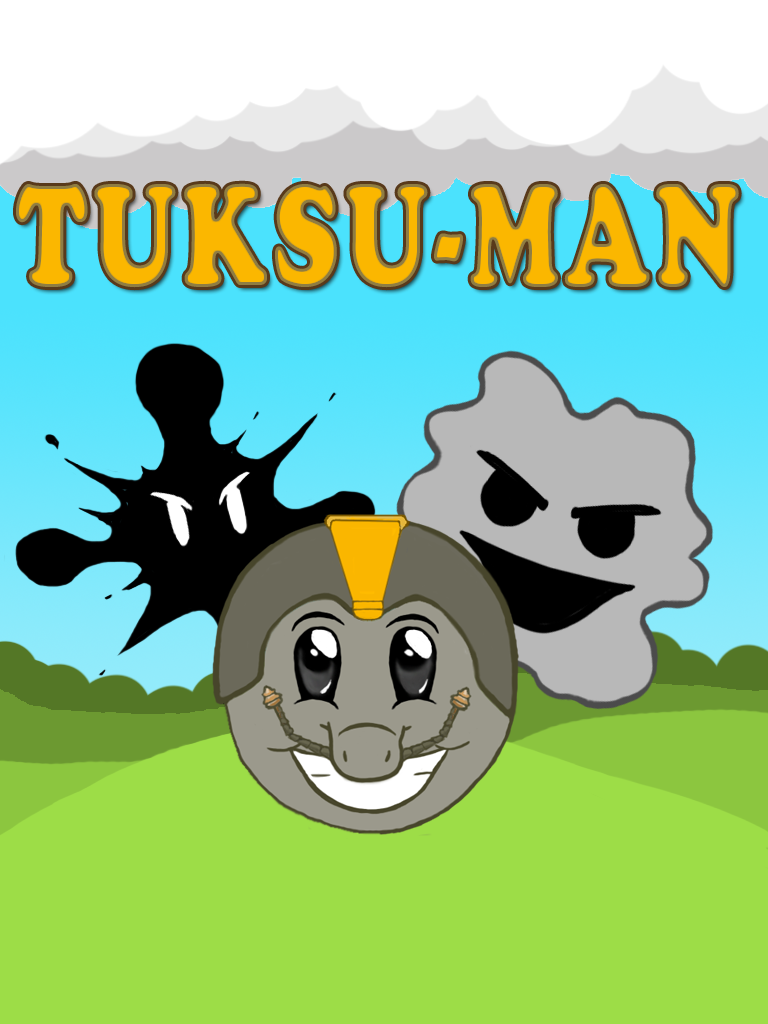
<style>
.page{position:relative;width:768px;height:1024px;background:#9ddd47}
.page>*{position:absolute;margin:0}
.t1{font:141.8px "CooperBlackStd";letter-spacing:0.06em;color:#fbb700;scale:0.68 1}
</style>
<div class="page">
<p class="t1" style="left:16px;top:183px;width:723px;height:105px">TUKSU-MAN</p>
</div>
